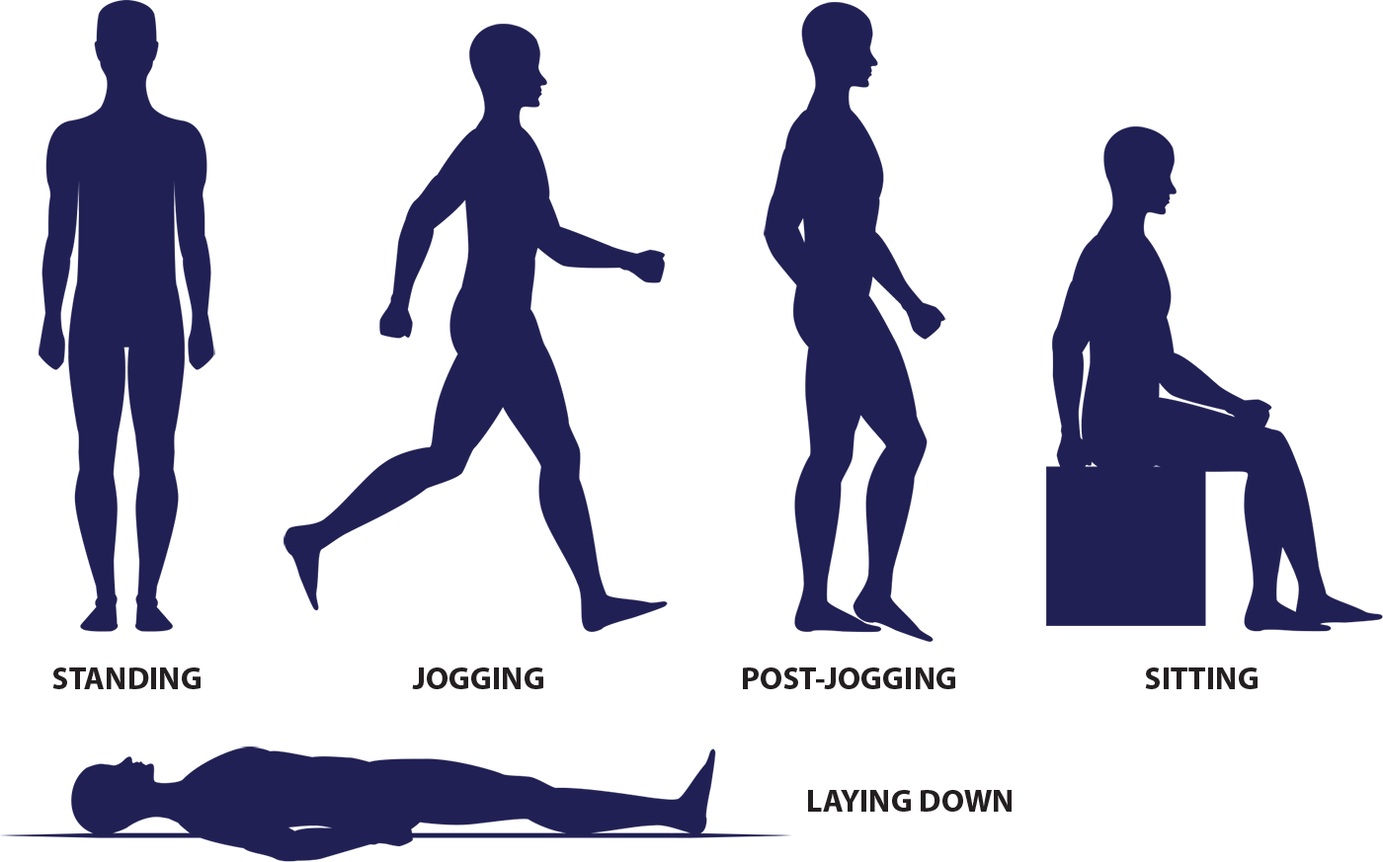
<style>
.page{position:relative;width:1383px;height:862px;background:#ffffff}
.page>*{position:absolute;margin:0}
.t1{font:31.9px "MyriadPro-Bold";color:#231f20}
</style>
<div class="page">
<p class="t1" style="left:52px;top:668px;width:149px;height:21px">STANDING</p>
<p class="t1" style="left:412px;top:668px;width:131px;height:21px">JOGGING</p>
<p class="t1" style="left:743px;top:668px;width:212px;height:21px">POST-JOGGING</p>
<p class="t1" style="left:1145px;top:668px;width:112px;height:21px">SITTING</p>
<p class="t1" style="left:808px;top:790px;width:203px;height:22px">LAYING DOWN</p>
</div>
